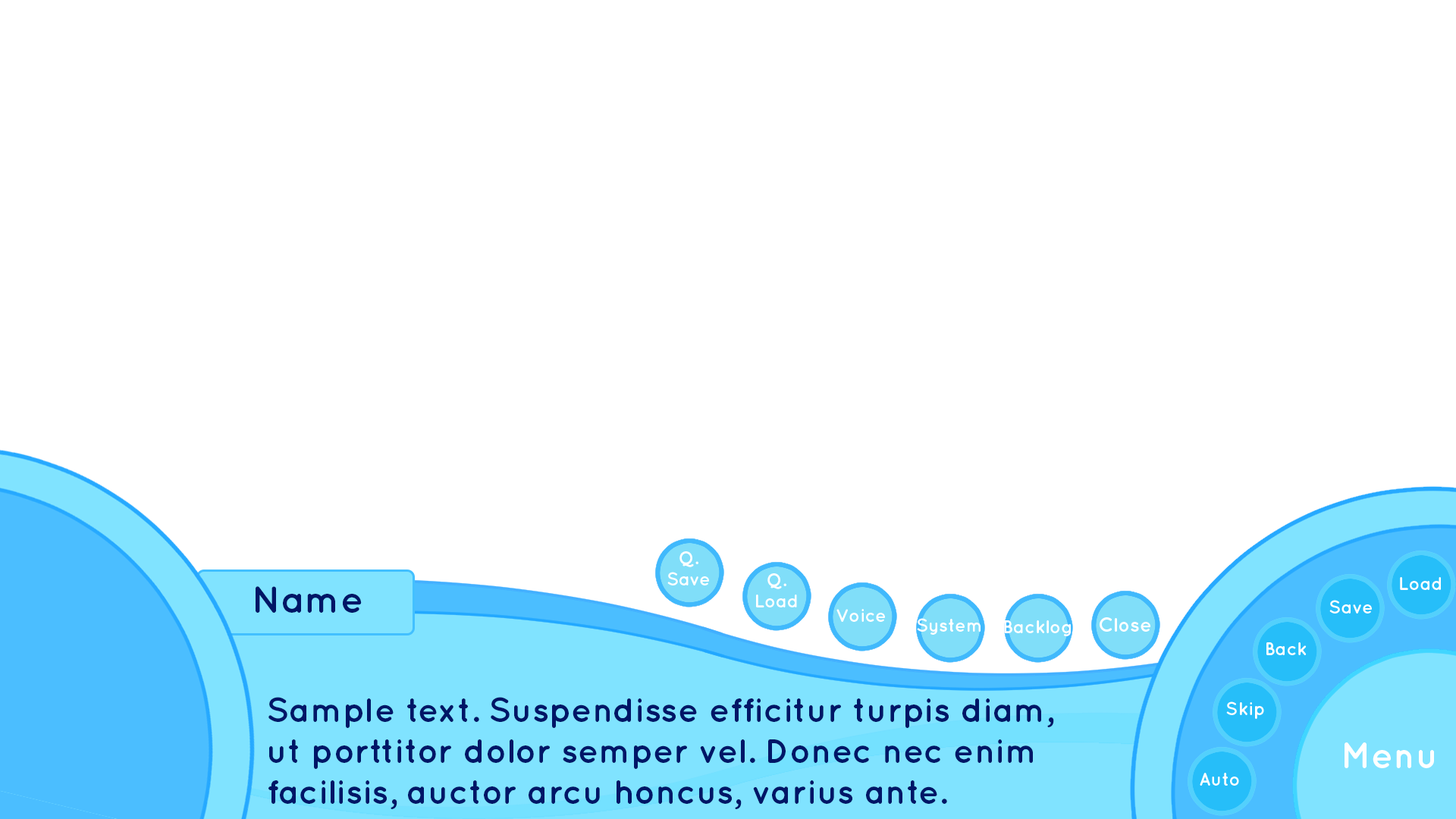
<style>
.page{position:relative;width:1456px;height:819px;background:#ffffff}
.page>*{position:absolute;margin:0}
.t1{font:37.9px "Quicksand-Bold";color:#001667}
.t2{font:34.1px "Quicksand-Bold";color:#001667}
</style>
<div class="page">
<p class="t1" style="left:256px;top:586px;width:106px;height:27px">Name</p>
<p class="t2" style="left:268px;top:697px;width:786px;height:112px">Sample text. Suspendisse efficitur turpis diam, <br>ut porttitor dolor semper vel. Donec nec enim <br>facilisis, auctor arcu honcus, varius ante.</p>
</div>
